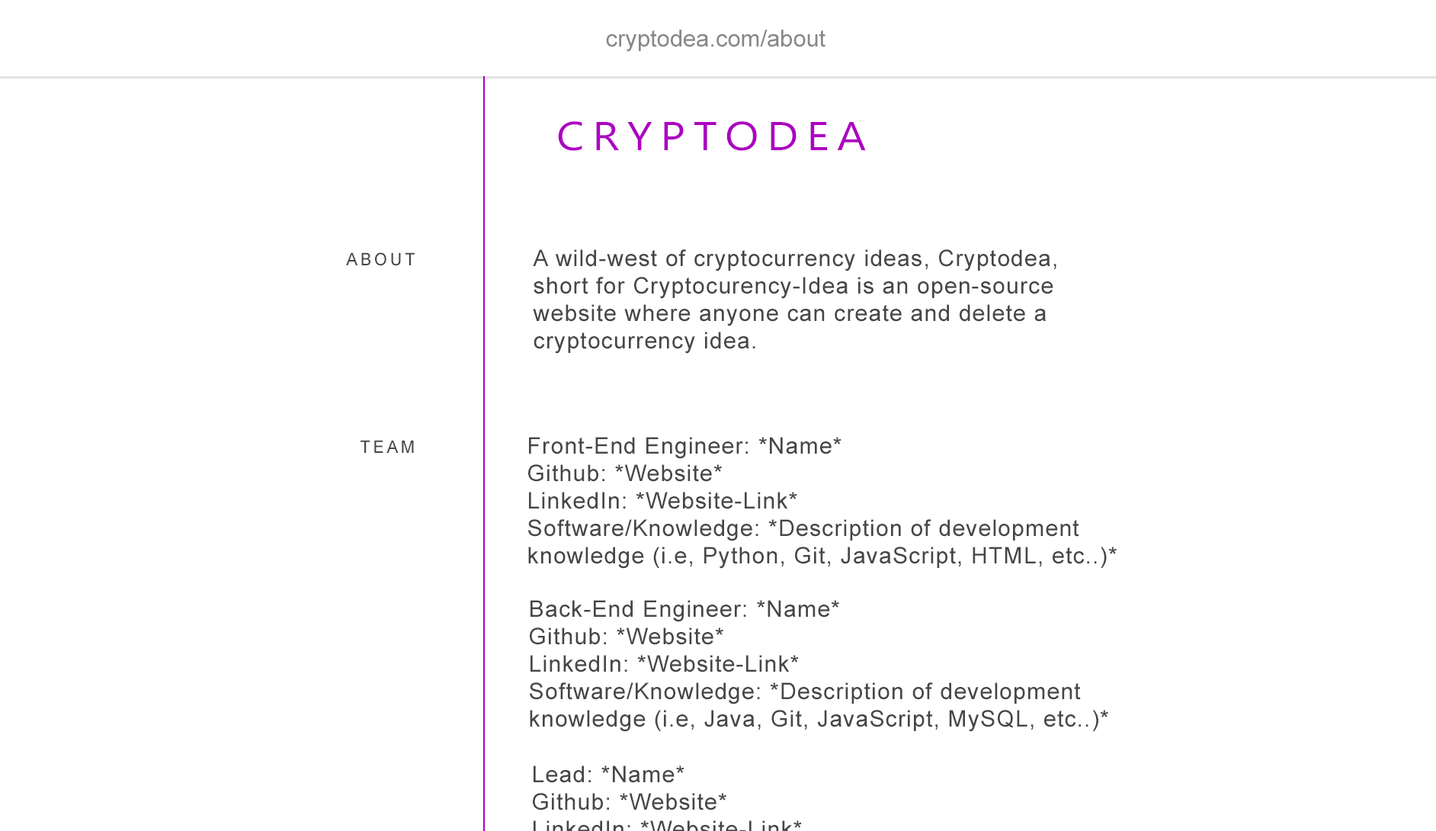
<style>
.page{position:relative;width:1436px;height:831px;background:#ffffff}
.page>*{position:absolute;margin:0}
.t1{font:23.2px "ArialMT";color:#888888}
.t2{font:40.4px "Ebrima";letter-spacing:0.18em;color:#ad00c2;scale:1.11 1}
.t3{font:17.4px "ArialMT";letter-spacing:0.18em;color:#464646;scale:0.95 1}
.t4{font:22.9px "ArialMT";letter-spacing:0.04em;color:#464646}
</style>
<div class="page">
<p class="t1" style="left:606px;top:30px;width:219px;height:22px">cryptodea.com/about</p>
<p class="t2" style="left:558px;top:121px;width:308px;height:30px">CRYPTODEA</p>
<p class="t3" style="left:346px;top:252px;width:69px;height:201px;text-align:right">ABOUT<br><br><br><br><br><br><br><br><br>TEAM</p>
<p class="t4" style="left:533px;top:249px;width:523px;height:105px">A wild-west of cryptocurrency ideas, Cryptodea,<br>short for Cryptocurency-Idea is an open-source<br>website where anyone can create and delete a<br>cryptocurrency idea.</p>
<p class="t4" style="left:528px;top:437px;width:588px;height:131px">Front-End Engineer: *Name*<br>Github: *Website*<br>LinkedIn: *Website-Link*<br>Software/Knowledge: *Description of development<br>knowledge (i.e, Python, Git, JavaScript, HTML, etc..)*</p>
<p class="t4" style="left:530px;top:600px;width:578px;height:132px">Back-End Engineer: *Name*<br>Github: *Website*<br>LinkedIn: *Website-Link*<br>Software/Knowledge: *Description of development<br>knowledge (i.e, Java, Git, JavaScript, MySQL, etc..)*</p>
</div>
